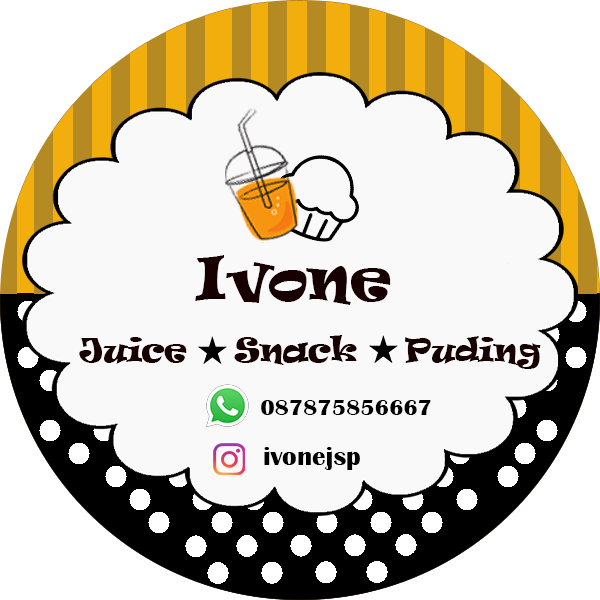
<style>
.page{position:relative;width:600px;height:600px;background:#f9f9f9}
.page>*{position:absolute;margin:0}
.t1{font:55.9px "Ravie";color:#170000}
.t2{font:30.5px "Ravie";color:#170000}
.t3{font:23.4px "BritannicBold";color:#000000}
.t4{font:27px "BritannicBold";color:#000000}
</style>
<div class="page">
<p class="t1" style="left:195px;top:255px;width:196px;height:50px">Ivone</p>
<p class="t2" style="left:79px;top:335px;width:462px;height:34px">Juice    Snack    Puding</p>
<p class="t3" style="left:261px;top:400px;width:170px;height:15px">087875856667</p>
<p class="t4" style="left:264px;top:447px;width:96px;height:23px">ivonejsp</p>
</div>
